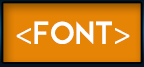
<style>
.page{position:relative;width:144px;height:67px;background:#e68405}
.page>*{position:absolute;margin:0}
.t1{font:30px "ModernSans";color:#ffffff}
.t2{font:30px "MyriadPro-Regular";color:#ffffff}
</style>
<div class="page">
<p class="t1" style="left:16px;top:21px;width:114px;height:23px"><span class="t2">&lt;</span>FONT<span class="t2">&gt;</span></p>
</div>
